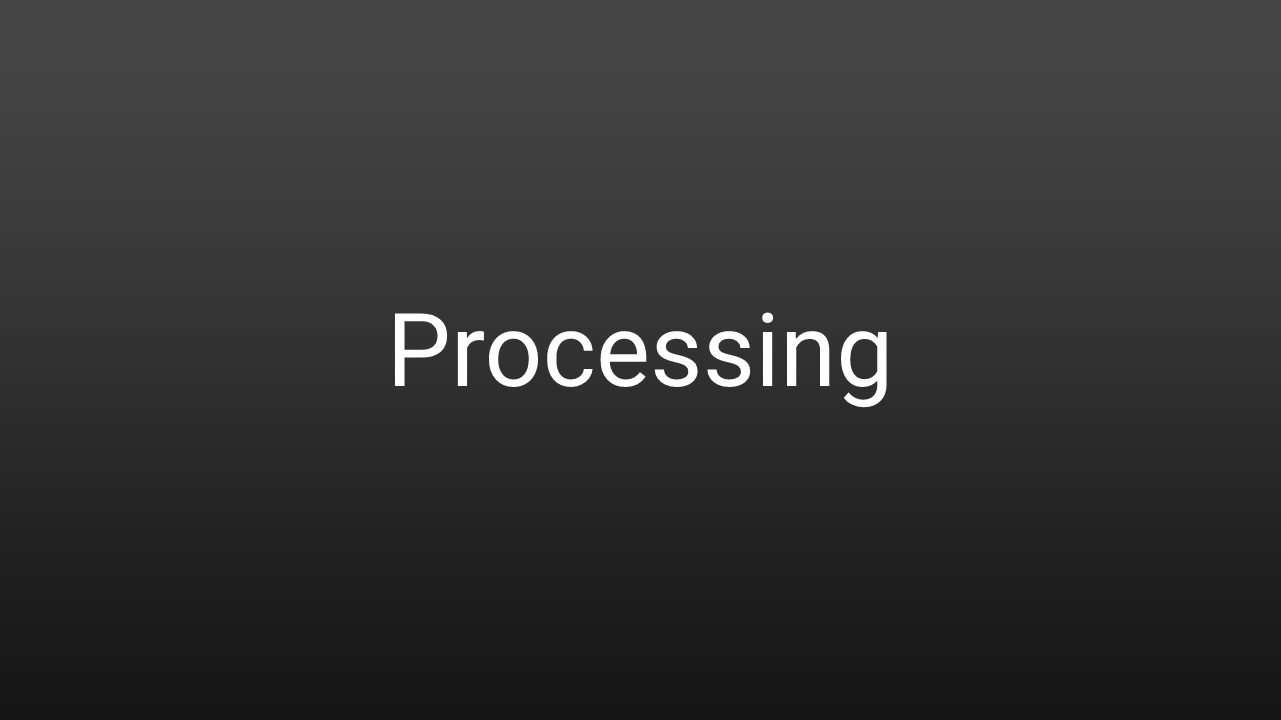
<style>
.page{position:relative;width:1281px;height:720px}
.page>*{position:absolute;margin:0}
.t1{font:102px "Roboto-Regular";color:#ffffff}
</style>
<div class="page">
<p class="t1" style="left:394px;top:312px;width:493px;height:96px">Processing</p>
</div>
